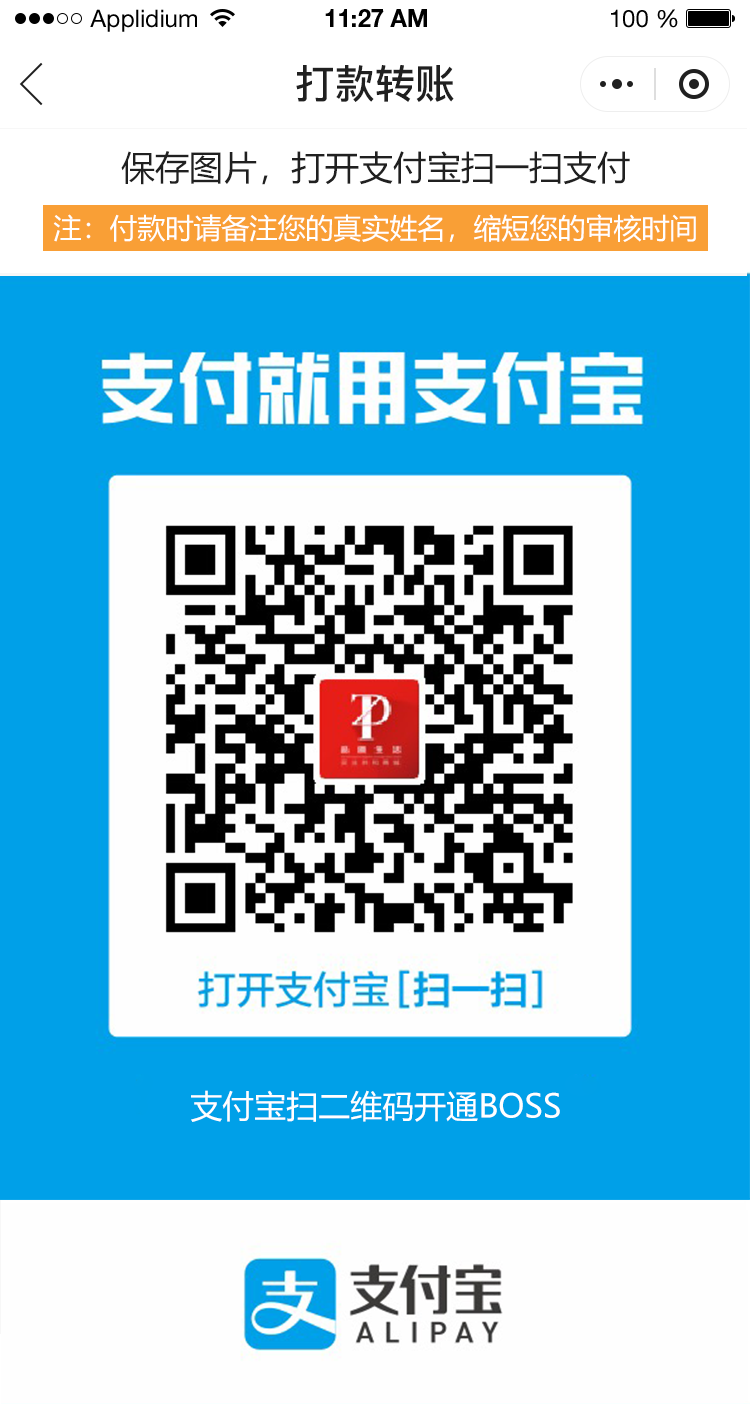
<style>
.page{position:relative;width:750px;height:1404px;background:#00a0e8}
.page>*{position:absolute;margin:0}
.t1{font:24px "HelveticaNeueLTStd-Roman";color:#000000}
.t2{font:24px "HelveticaNeueLTStd-Bd";color:#000000}
.t3{font:40px "PingFang-SC-Bold";color:#202020;text-transform:uppercase}
.t4{font:34px "MicrosoftYaHei";color:#202020;text-transform:uppercase}
.t5{font:28px "MicrosoftYaHei";color:#ffffff;text-transform:uppercase}
.t6{font:32px "MicrosoftYaHei";color:#ffffff;text-transform:uppercase}
</style>
<div class="page">
<p class="t1" style="left:90px;top:9px;width:107px;height:23px">Applidium</p>
<p class="t2" style="left:325px;top:9px;width:102px;height:18px">11:27 AM</p>
<p class="t1" style="left:611px;top:9px;width:67px;height:19px">100 %</p>
<p class="t3" style="left:296px;top:65px;width:158px;height:37px">打款转账</p>
<p class="t4" style="left:121px;top:151px;width:509px;height:34px">保存图片，打开支付宝扫一扫支付</p>
<p class="t5" style="left:53px;top:214px;width:643px;height:28px">注：付款时请备注您的真实姓名，缩短您的审核时间</p>
<p class="t6" style="left:191px;top:1090px;width:369px;height:32px">支付宝扫二维码开通boss</p>
</div>
